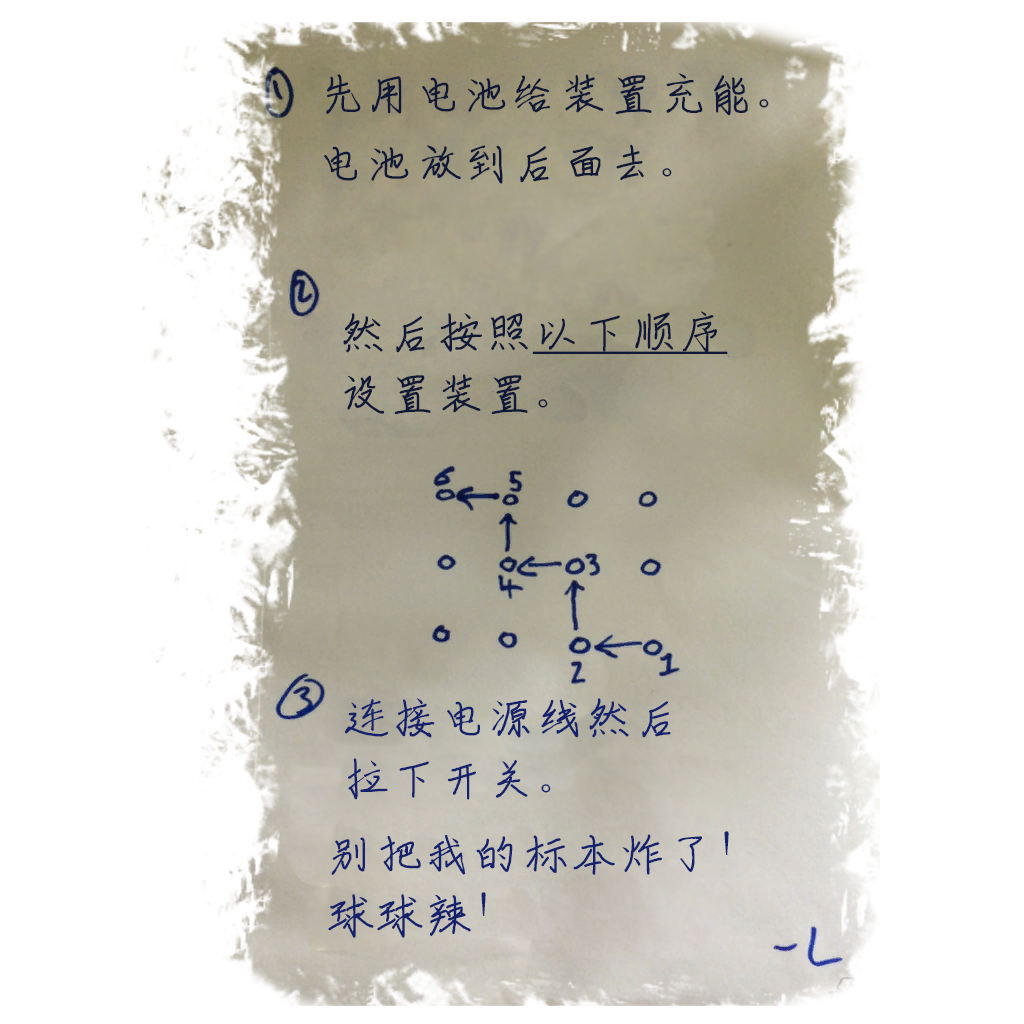
<style>
.page{position:relative;width:1024px;height:1024px;background:#ffffff}
.page>*{position:absolute;margin:0}
.t1{font:48.6px "ShouShuti";color:#101838}
.t2{font:48.6px/61.5px "ShouShuti";color:#101838}
.t3{font:48.6px/61.5px "ShouShuti";color:#101838;text-decoration:underline}
.t4{font:48.6px/61.5px "ShouShuti";color:#14216c}
</style>
<div class="page">
<p class="t1" style="left:326px;top:73px;width:443px;height:43px">先用电池给装置充能。</p>
<p class="t1" style="left:324px;top:144px;width:348px;height:40px">电池放到后面去。</p>
<p class="t2" style="left:343px;top:311px;width:385px;height:103px">然后按照<span class="t3">以下顺序<br></span>设置装置。</p>
<p class="t4" style="left:345px;top:698px;width:326px;height:102px">连接电源线然后<br>拉下开关。</p>
<p class="t4" style="left:328px;top:831px;width:401px;height:107px">别把我的标本炸了！<br>球球辣！</p>
</div>
